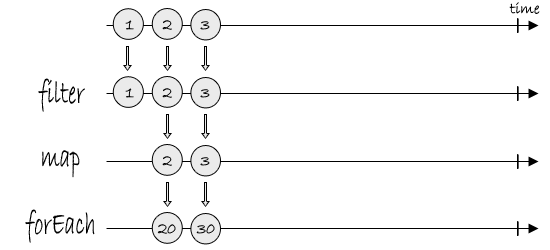
<style>
.page{position:relative;width:550px;height:250px;background:#ffffff}
.page>*{position:absolute;margin:0}
.t1{font:15.9px "BradleyHandITC";color:#000000}
.t2{font:16.7px "BradleyHandITC";color:#000000}
.t3{font:33.3px "BradleyHandITC";color:#000000;scale:0.66 1}
.t4{font:16.7px "BradleyHandITC"}
</style>
<div class="page">
<p class="t1" style="left:509px;top:2px;width:31px;height:12px">time</p>
<p class="t2" style="left:125px;top:20px;width:9px;height:10px">1</p>
<p class="t2" style="left:162px;top:20px;width:10px;height:10px">2</p>
<p class="t2" style="left:200px;top:21px;width:10px;height:9px">3</p>
<p class="t3" style="left:38px;top:78px;width:47px;height:34px">filter</p>
<p class="t2" style="left:125px;top:88px;width:9px;height:10px">1</p>
<p class="t2" style="left:162px;top:88px;width:10px;height:10px">2</p>
<p class="t2" style="left:200px;top:89px;width:10px;height:9px">3</p>
<p class="t3" style="left:42px;top:150px;width:38px;height:28px">map</p>
<p class="t2" style="left:162px;top:156px;width:10px;height:10px">2</p>
<p class="t2" style="left:200px;top:157px;width:10px;height:9px">3</p>
<p class="t3" style="left:25px;top:209px;width:70px;height:34px;text-align:right">forEach<br>h</p>
<p class="t4" style="left:157px;top:224px;width:19px;height:10px">20</p>
<p class="t2" style="left:196px;top:224px;width:19px;height:10px">30</p>
</div>
